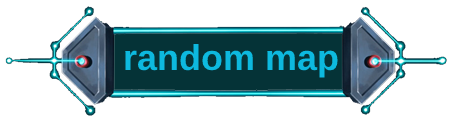
<style>
.page{position:relative;width:453px;height:122px;background:#ffffff}
.page>*{position:absolute;margin:0}
.t1{font:36px "Arial-BoldMT";color:#0db9df}
</style>
<div class="page">
<p class="t1" style="left:125px;top:43px;width:213px;height:35px">random map</p>
</div>
